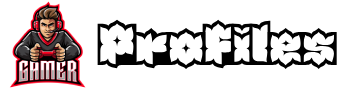
<style>
.page{position:relative;width:344px;height:90px;background:#ffffff}
.page>*{position:absolute;margin:0}
.t1{font:68px "Honk-Flower";color:#000000}
</style>
<div class="page">
<p class="t1" style="left:97px;top:19px;width:240px;height:51px">Profiles</p>
</div>
